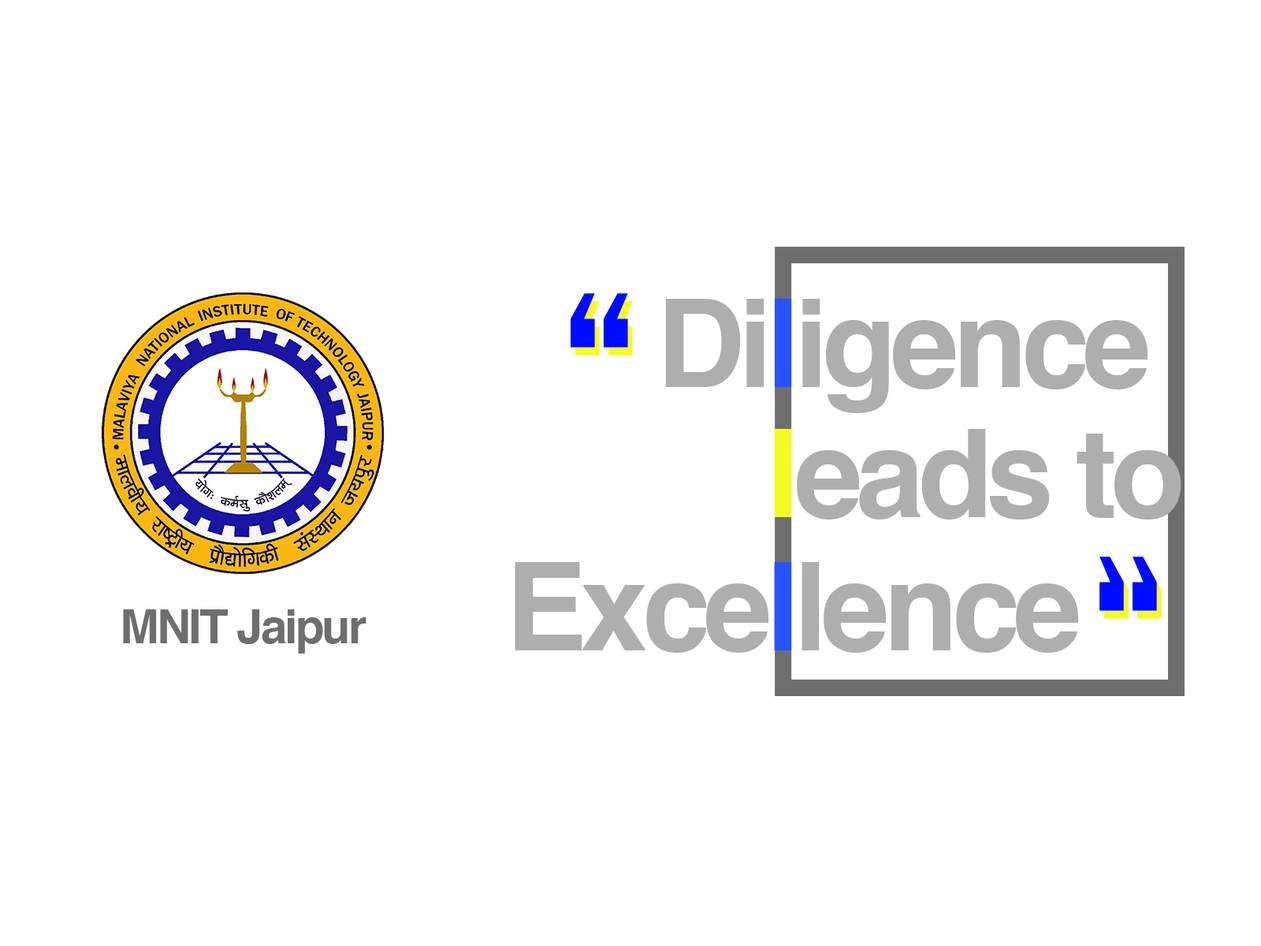
<style>
.page{position:relative;width:1261px;height:946px;background:#ffffff}
.page>*{position:absolute;margin:0}
.t1{font:193.6px "FranklinGothic-DemiCond";letter-spacing:-0.05em;color:#000cff}
.t2{font:122.2px "Helvetica-Bold";letter-spacing:-0.05em;color:#aeaeae}
.t3{font:122.2px "Helvetica-Bold";letter-spacing:-0.05em;color:#2653fa}
.t4{font:122.2px "Helvetica-Bold";letter-spacing:-0.05em;color:#f3fa26}
.t5{font:47.3px "Helvetica-Bold";letter-spacing:-0.05em;color:#6f6e6e}
</style>
<div class="page">
<p class="t1" style="left:570px;top:293px;width:58px;height:55px">“</p>
<p class="t2" style="left:665px;top:299px;width:483px;height:114px">Di<span class="t3">l</span>igence</p>
<p class="t2" style="left:774px;top:429px;width:407px;height:90px"><span class="t4">l</span>eads to</p>
<p class="t1" style="left:1099px;top:556px;width:58px;height:55px;rotate:180deg">“</p>
<p class="t2" style="left:515px;top:562px;width:564px;height:91px">Exce<span class="t3">l</span>lence</p>
<p class="t5" style="left:123px;top:609px;width:243px;height:44px">MNIT Jaipur</p>
</div>
